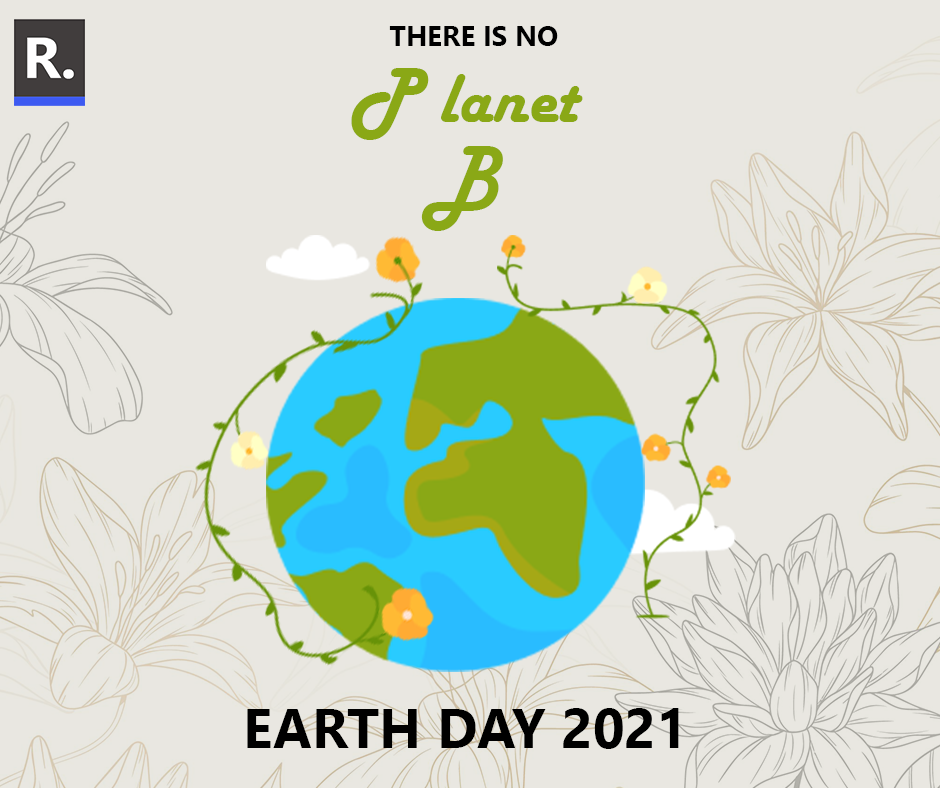
<style>
.page{position:relative;width:940px;height:788px;background:#e9e7e1}
.page>*{position:absolute;margin:0}
.t1{font:27.9px "SegoeUI-Bold";color:#000000}
.t2{font:72.4px "HarlowSolid";color:#8aa816}
.t3{font:81.4px "HarlowSolid";color:#8aa816}
.t4{font:55.3px "SegoeUI-Bold";color:#000000}
</style>
<div class="page">
<p class="t1" style="left:389px;top:26px;width:169px;height:20px">THERE IS NO</p>
<p class="t2" style="left:351px;top:68px;width:232px;height:72px"><span class="t3">P </span>lanet</p>
<p class="t3" style="left:421px;top:146px;width:82px;height:85px">B</p>
<p class="t4" style="left:247px;top:708px;width:432px;height:41px">EARTH DAY 2021</p>
</div>
